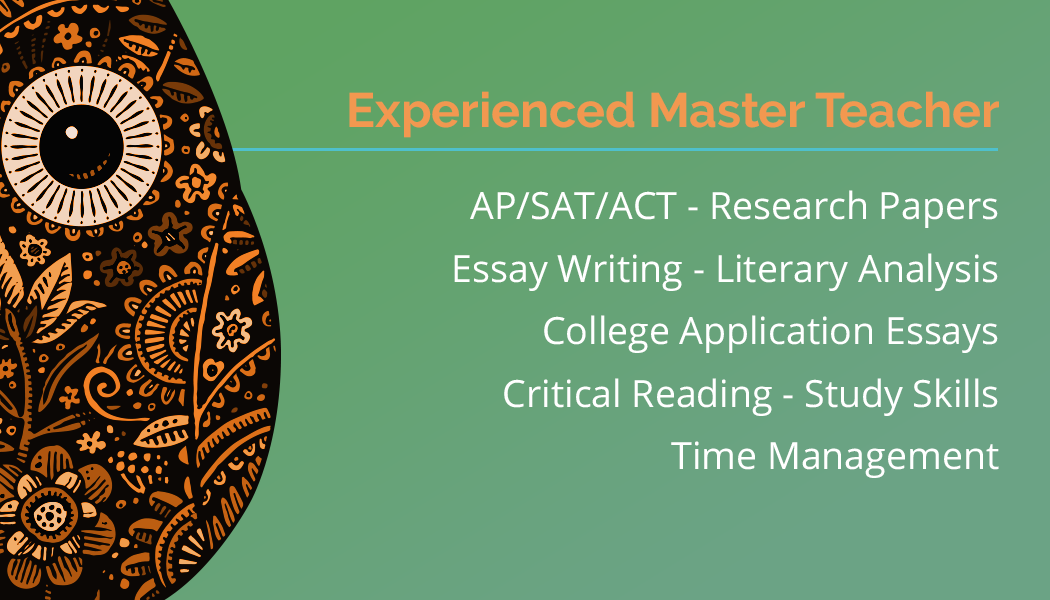
<style>
.page{position:relative;width:1050px;height:600px}
.page>*{position:absolute;margin:0}
.t1{font:48.3px "Raleway-Bold";color:#f29850}
.t2{font:37.5px/62.5px "OpenSans-Regular";color:#ffffff}
</style>
<div class="page">
<p class="t1" style="left:349px;top:91px;width:650px;height:47px">Experienced Master Teacher</p>
<p class="t2" style="left:454px;top:190px;width:545px;height:288px;text-align:right">AP/SAT/ACT - Research Papers<br>Essay Writing - Literary Analysis<br>College Application Essays<br>Critical Reading - Study Skills<br>Time Management</p>
</div>
